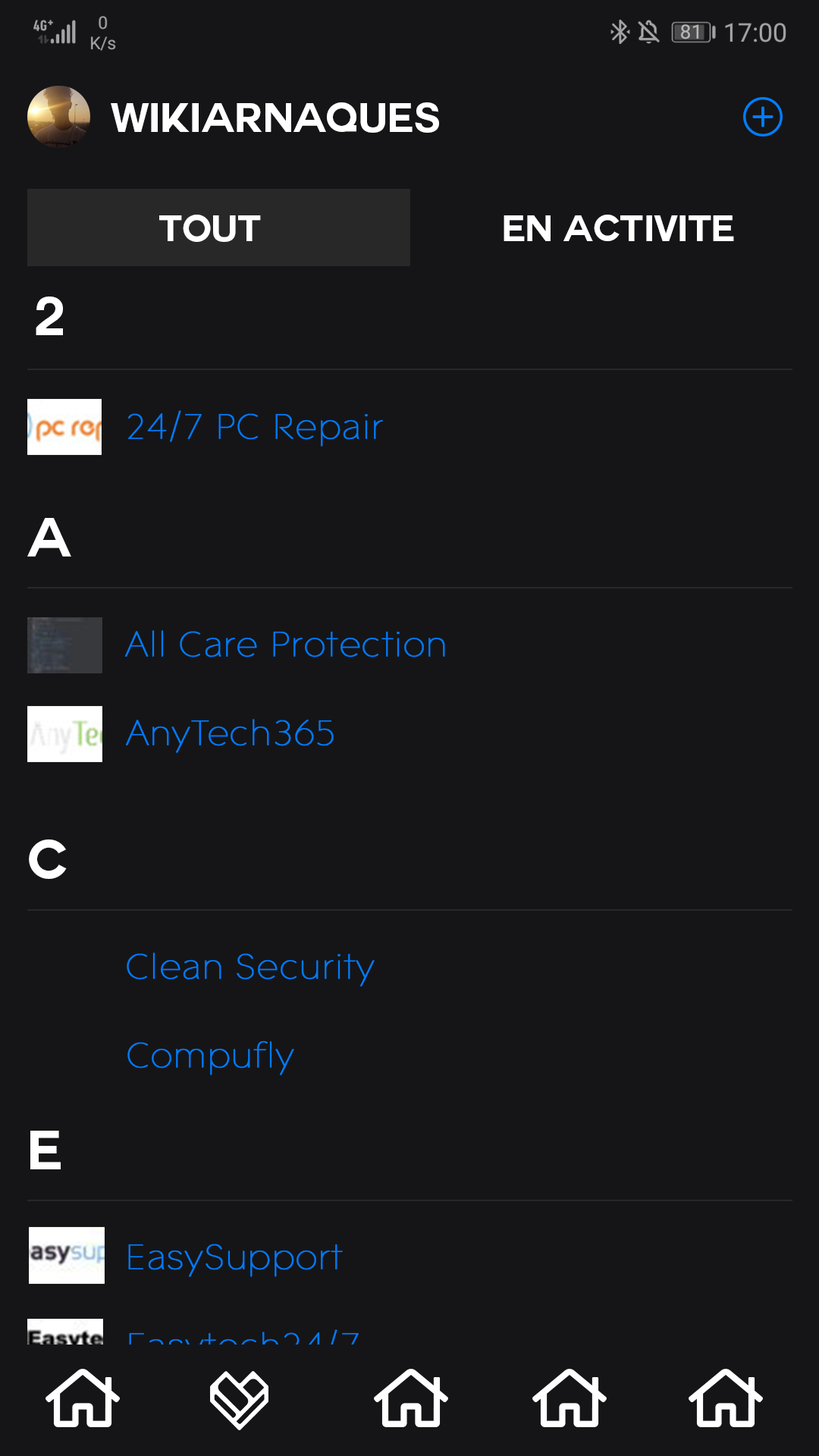
<style>
.page{position:relative;width:819px;height:1456px;background:#151517}
.page>*{position:absolute;margin:0}
.t1{font:40.5px "Couture-Bold";color:#ffffff}
.t2{font:36.4px "Couture-Bold";color:#ffffff}
.t3{font:54.6px "Couture-Bold";color:#ffffff}
.t4{font:36.4px "ContaxW01-25UltraLight";color:#017bf9;font-weight:bold}
.t5{font:54.7px "Couture-Bold";color:#ffffff}
.t6{font:36.4px "ContaxW01-25UltraLight";font-weight:bold}
</style>
<div class="page">
<p class="t1" style="left:111px;top:102px;width:328px;height:31px">WikiArnaques</p>
<p class="t2" style="left:159px;top:215px;width:102px;height:27px">TOUT</p>
<p class="t2" style="left:504px;top:215px;width:230px;height:26px">EN ACTIVITE</p>
<p class="t3" style="left:36px;top:297px;width:27px;height:38px">2</p>
<p class="t4" style="left:128px;top:410px;width:255px;height:37px">24/7 PC Repair</p>
<p class="t3" style="left:27px;top:518px;width:44px;height:39px">A</p>
<p class="t4" style="left:125px;top:630px;width:320px;height:27px">All Care Protection</p>
<p class="t4" style="left:126px;top:719px;width:208px;height:34px">AnyTech365</p>
<p class="t5" style="left:29px;top:839px;width:38px;height:40px">C</p>
<p class="t4" style="left:127px;top:952px;width:248px;height:35px">Clean Security</p>
<p class="t4" style="left:127px;top:1040px;width:167px;height:35px">Compufly</p>
<p class="t3" style="left:30px;top:1131px;width:31px;height:38px">E</p>
<p class="t4" style="left:128px;top:1244px;width:215px;height:33px">EasySupport</p>
<p class="t6" style="left:129px;top:1329px;width:230px;height:37px">Easytech24/7</p>
</div>
